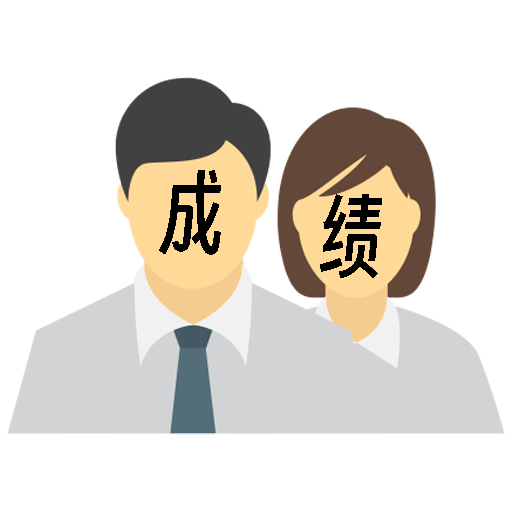
<style>
.page{position:relative;width:512px;height:512px;background:#ffffff}
.page>*{position:absolute;margin:0}
.t1{font:87.2px "SmileySans-Oblique";color:#000000;scale:0.97 1}
</style>
<div class="page">
<p class="t1" style="left:159px;top:170px;width:62px;height:85px">成</p>
<p class="t1" style="left:320px;top:194px;width:62px;height:84px">绩</p>
</div>
